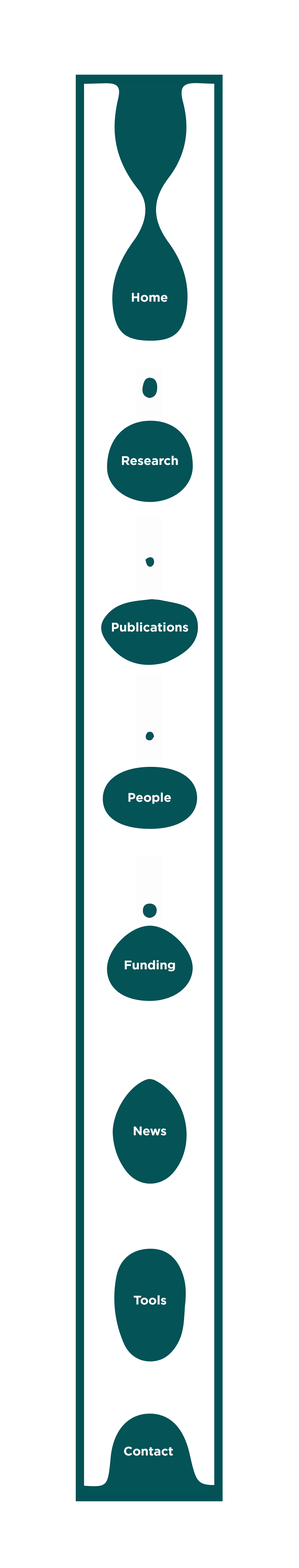
<style>
.page{position:relative;width:299px;height:1568px;background:#ffffff}
.page>*{position:absolute;margin:0}
.t1{font:12.4px "Gotham-Bold";color:#ffffff}
</style>
<div class="page">
<p class="t1" style="left:132px;top:293px;width:35px;height:9px">Home</p>
<p class="t1" style="left:122px;top:456px;width:56px;height:9px">Research</p>
<p class="t1" style="left:112px;top:622px;width:76px;height:10px">Publications</p>
<p class="t1" style="left:128px;top:792px;width:43px;height:12px">People</p>
<p class="t1" style="left:124px;top:960px;width:51px;height:11px">Funding</p>
<p class="t1" style="left:133px;top:1126px;width:33px;height:10px">News</p>
<p class="t1" style="left:133px;top:1295px;width:33px;height:10px">Tools</p>
<p class="t1" style="left:124px;top:1447px;width:49px;height:9px">Contact</p>
</div>
